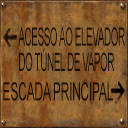
<style>
.page{position:relative;width:128px;height:128px}
.page>*{position:absolute;margin:0}
.t1{font:25.3px/25.3px "ArialMT";letter-spacing:-0.04em;color:#1c130a;text-transform:uppercase;scale:0.39 1}
.t2{font:25.3px "ArialMT";letter-spacing:-0.04em;color:#1b1309;text-transform:uppercase;scale:0.49 1}
</style>
<div class="page">
<p class="t1" style="left:18px;top:27px;width:107px;height:45px">ACESSO AO ELEVAdor <br>DO TÚNEL DE VAPOR</p>
<p class="t2" style="left:3px;top:82px;width:110px;height:19px">escada principal</p>
</div>
